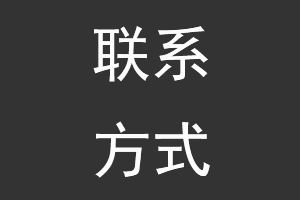
<style>
.page{position:relative;width:300px;height:200px;background:#333333}
.page>*{position:absolute;margin:0}
.t1{font:60px "SimHei";color:#fdfcfc}
</style>
<div class="page">
<p class="t1" style="left:93px;top:26px;width:115px;height:56px">联系</p>
<p class="t1" style="left:95px;top:121px;width:115px;height:57px">方式</p>
</div>
